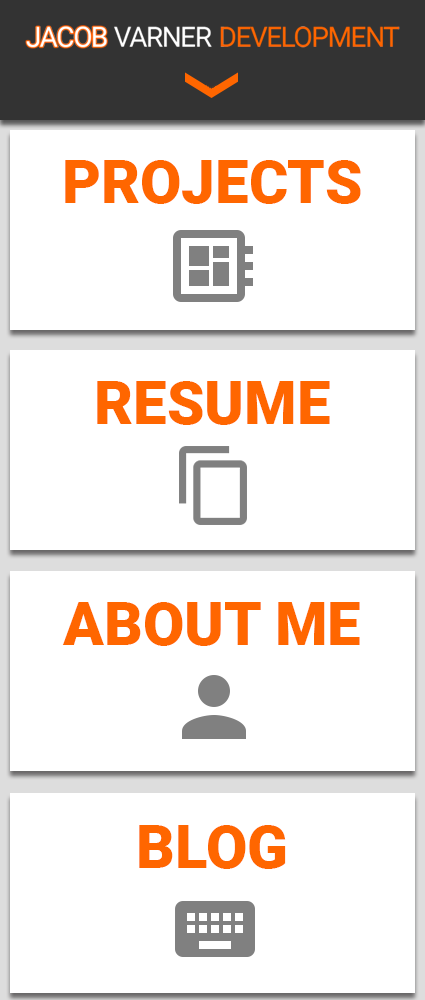
<style>
.page{position:relative;width:425px;height:1000px;background:#ffffff}
.page>*{position:absolute;margin:0}
.t1{font:60px "Roboto-Black";color:#ff6600}
</style>
<div class="page">
<p class="t1" style="left:65px;top:160px;width:296px;height:44px">PROJECTS</p>
<p class="t1" style="left:97px;top:381px;width:233px;height:44px">RESUME</p>
<p class="t1" style="left:62px;top:602px;width:298px;height:44px">ABOUT ME</p>
<p class="t1" style="left:139px;top:825px;width:147px;height:44px">BLOG</p>
</div>
